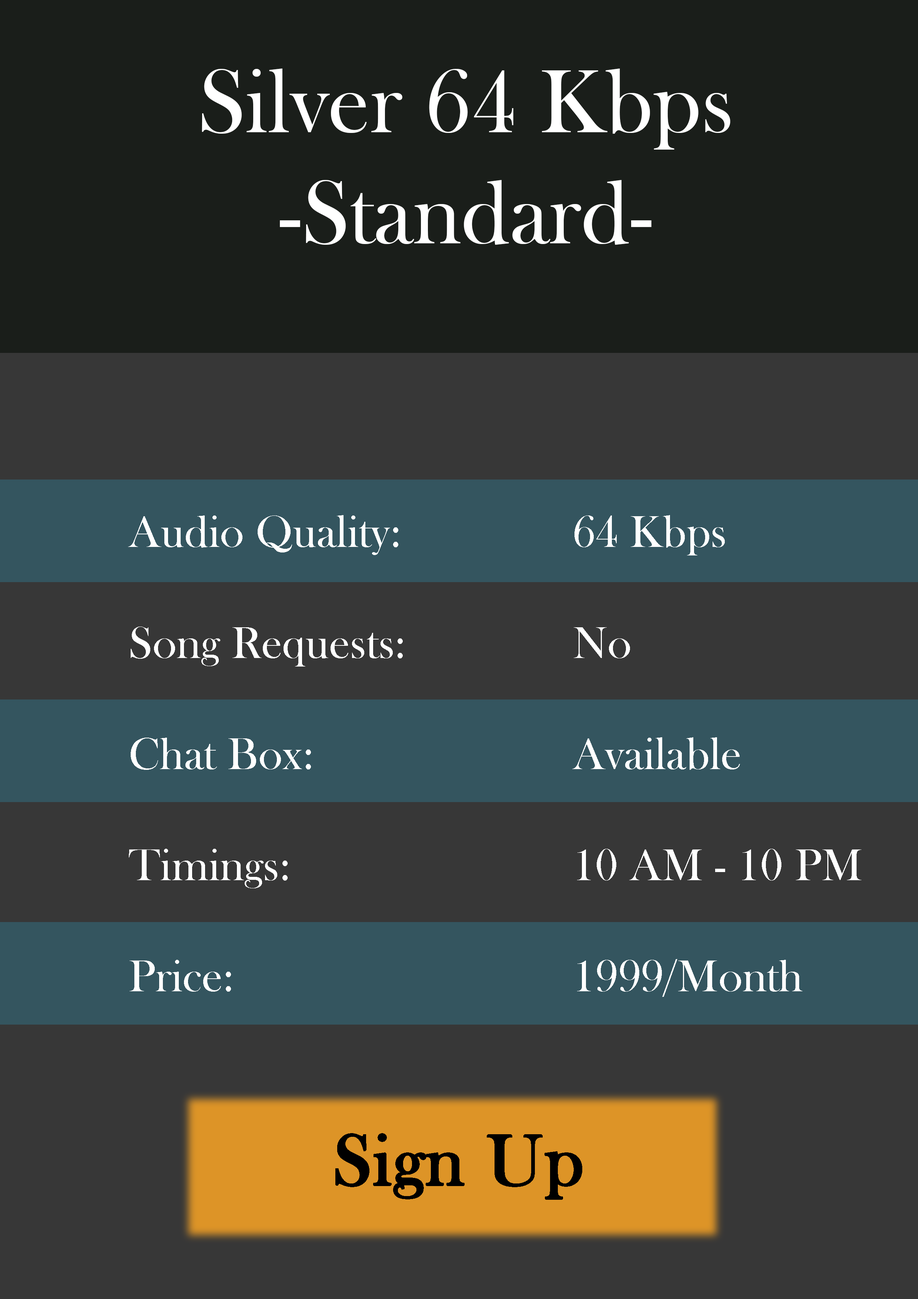
<style>
.page{position:relative;width:918px;height:1299px;background:#373737}
.page>*{position:absolute;margin:0}
.t1{font:92.6px "BaskOldFace";color:#ffffff}
.t2{font:46.3px "BaskOldFace";color:#ffffff}
.t3{font:74px "BaskOldFace";color:#000000;font-weight:bold}
</style>
<div class="page">
<p class="t1" style="left:202px;top:68px;width:528px;height:177px;text-align:center">Silver 64 Kbps<br>-Standard-</p>
<p class="t2" style="left:128px;top:515px;width:275px;height:476px">Audio Quality:<br><br>Song Requests:<br><br>Chat Box: <br><br>Timings:<br><br>Price:</p>
<p class="t2" style="left:572px;top:515px;width:290px;height:482px">64 Kbps<br><br>No<br><br>Available<br><br>10 AM - 10 PM<br><br>1999/Month</p>
<p class="t3" style="left:335px;top:1133px;width:247px;height:67px">Sign Up</p>
</div>
